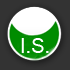
<style>
.page{position:relative;width:70px;height:70px;background:#333333}
.page>*{position:absolute;margin:0}
.t1{font:20px "ArialMT";color:#ffffff}
</style>
<div class="page">
<p class="t1" style="left:21px;top:38px;width:28px;height:15px">I.S.</p>
</div>
